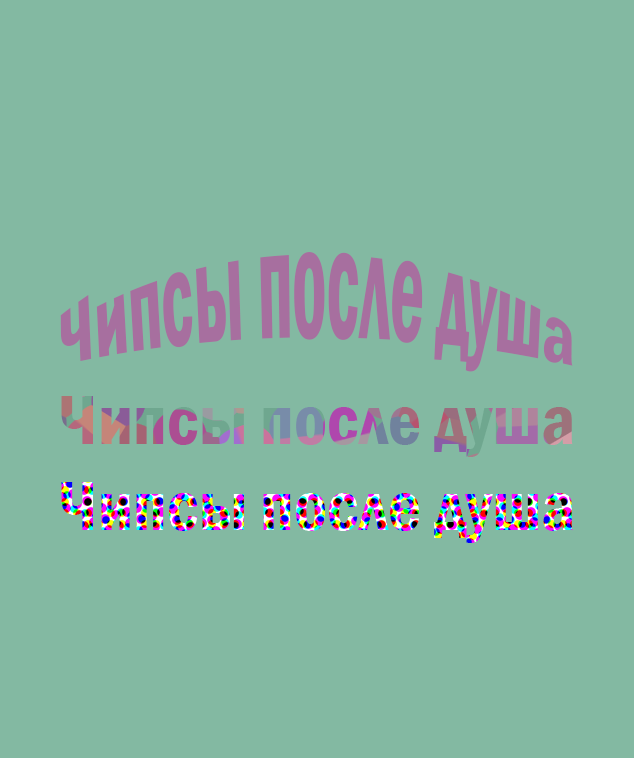
<style>
.page{position:relative;width:634px;height:758px;background:#83b9a2}
.page>*{position:absolute;margin:0}
.t1{font:72px "FranklinGothic-DemiCond";color:#a76f9f}
</style>
<div class="page">
<p class="t1" style="left:60px;top:252px;width:513px;height:120px">Чипсы после душа</p>
</div>
